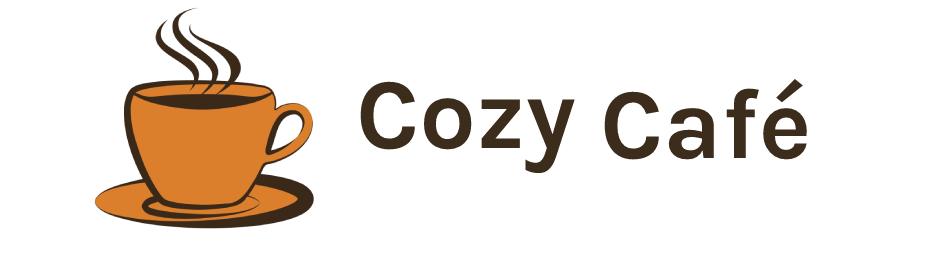
<style>
.page{position:relative;width:936px;height:256px;background:#ffffff}
.page>*{position:absolute;margin:0}
.t1{font:100px "Karla-Bold";color:#3c2c1c}
</style>
<div class="page">
<p class="t1" style="left:360px;top:81px;width:215px;height:93px">Cozy</p>
<p class="t1" style="left:604px;top:79px;width:204px;height:81px">Café</p>
</div>
